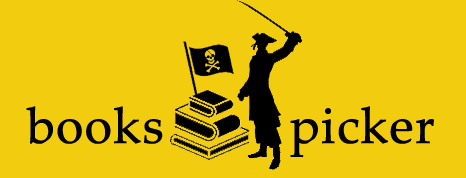
<style>
.page{position:relative;width:466px;height:178px;background:#f2cc0f}
.page>*{position:absolute;margin:0}
.t1{font:50px "PalatinoLinotype-Roman";color:#000000;font-weight:bold}
</style>
<div class="page">
<p class="t1" style="left:26px;top:106px;width:408px;height:52px">books         picker</p>
</div>
